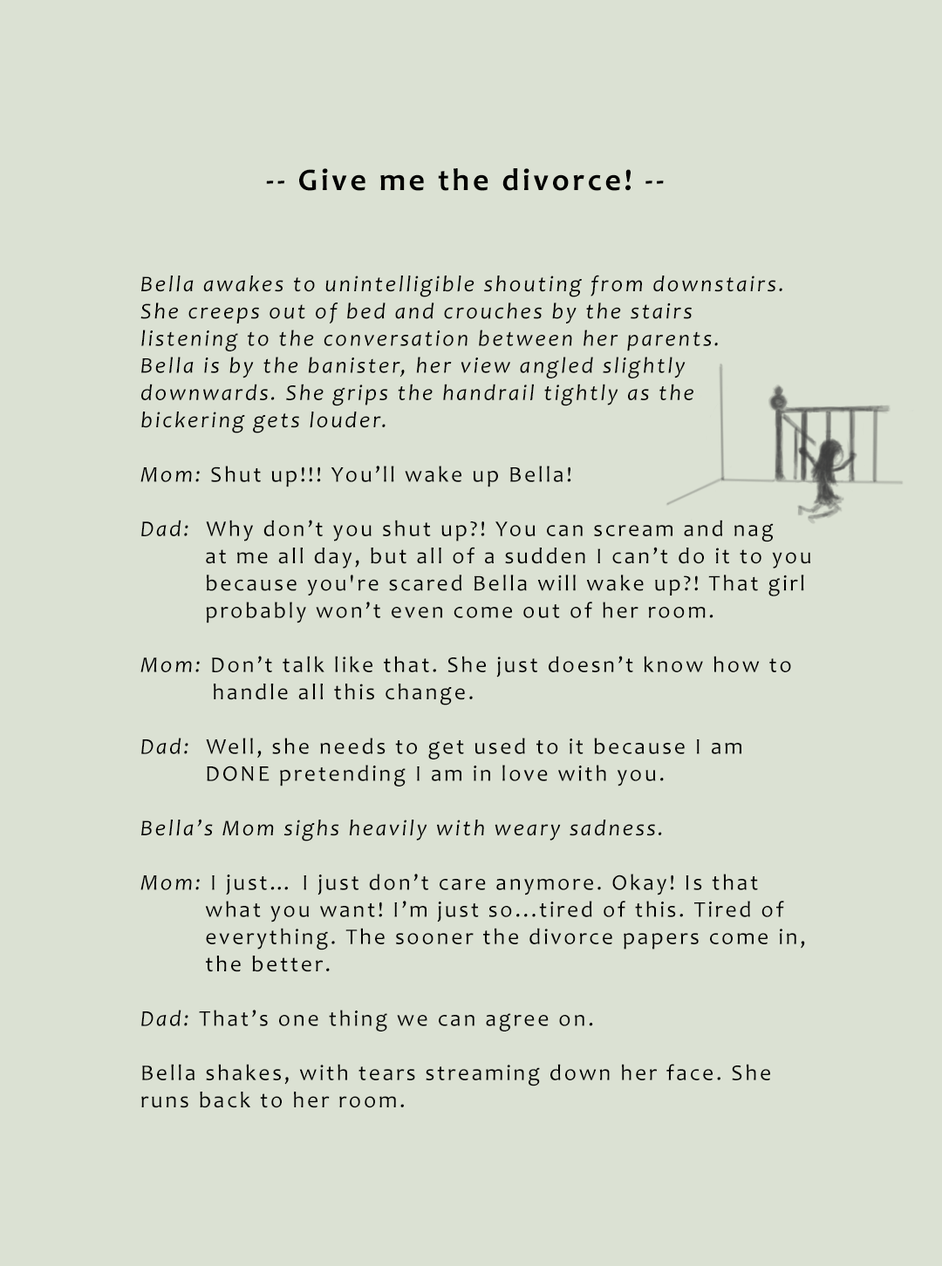
<style>
.page{position:relative;width:942px;height:1266px;background:#dbe1d3}
.page>*{position:absolute;margin:0}
.t1{font:31.4px "Candara-Bold";letter-spacing:0.1em;color:#000000}
.t2{font:22.7px "Candara-Italic";letter-spacing:0.1em;color:#000000}
.t3{font:22.7px "Candara";letter-spacing:0.1em;color:#000000}
</style>
<div class="page">
<p class="t1" style="left:266px;top:168px;width:398px;height:23px">-- Give me the divorce! --</p>
<p class="t2" style="left:140px;top:275px;width:670px;height:833px">Bella awakes to unintelligible shouting from downstairs. <br>She creeps out of bed and crouches by the stairs <br>listening to the conversation between her parents. <br>Bella is by the banister, her view angled slightly <br>downwards. She grips the handrail tightly as the <br>bickering gets louder.<br><br>Mom:<span class="t3"> Shut up!!! You’ll wake up Bella!<br><br></span>Dad:<span class="t3">  Why don’t you shut up?! You can scream and nag <br>         at me all day, but all of a sudden I can’t do it to you <br>         because you're scared Bella will wake up?! That girl <br>         probably won’t even come out of her room.<br><br></span>Mom:<span class="t3"> Don’t talk like that. She just doesn’t know how to <br>          handle all this change.<br><br></span>Dad:<span class="t3">  Well, she needs to get used to it because I am <br>         DONE pretending I am in love with you.<br><br></span>Bella’s Mom sighs heavily with weary sadness.<br><br>Mom:<span class="t3"> I just… I just don’t care anymore. Okay! Is that <br>         what you want! I’m just so...tired of this. Tired of <br>         everything. The sooner the divorce papers come in, <br>         the better.<br><br></span>Dad:<span class="t3"> That’s one thing we can agree on.<br><br>Bella shakes, with tears streaming down her face. She <br>runs back to her room.</span></p>
</div>
